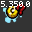
<style>
.page{position:relative;width:32px;height:32px;background:#333333}
.page>*{position:absolute;margin:0}
.t1{font:9px "Consolas";letter-spacing:-0.1em;color:#ffffff}
.t2{font:9px "Consolas";letter-spacing:0.08em;color:#ffffff}
.t3{font:9px "Consolas";letter-spacing:-0.24em;color:#ffffff}
</style>
<div class="page">
<p class="t1" style="left:1px;top:1px;width:29px;height:6px">5.<span class="t2">35</span><span class="t3">0</span>.0</p>
</div>
